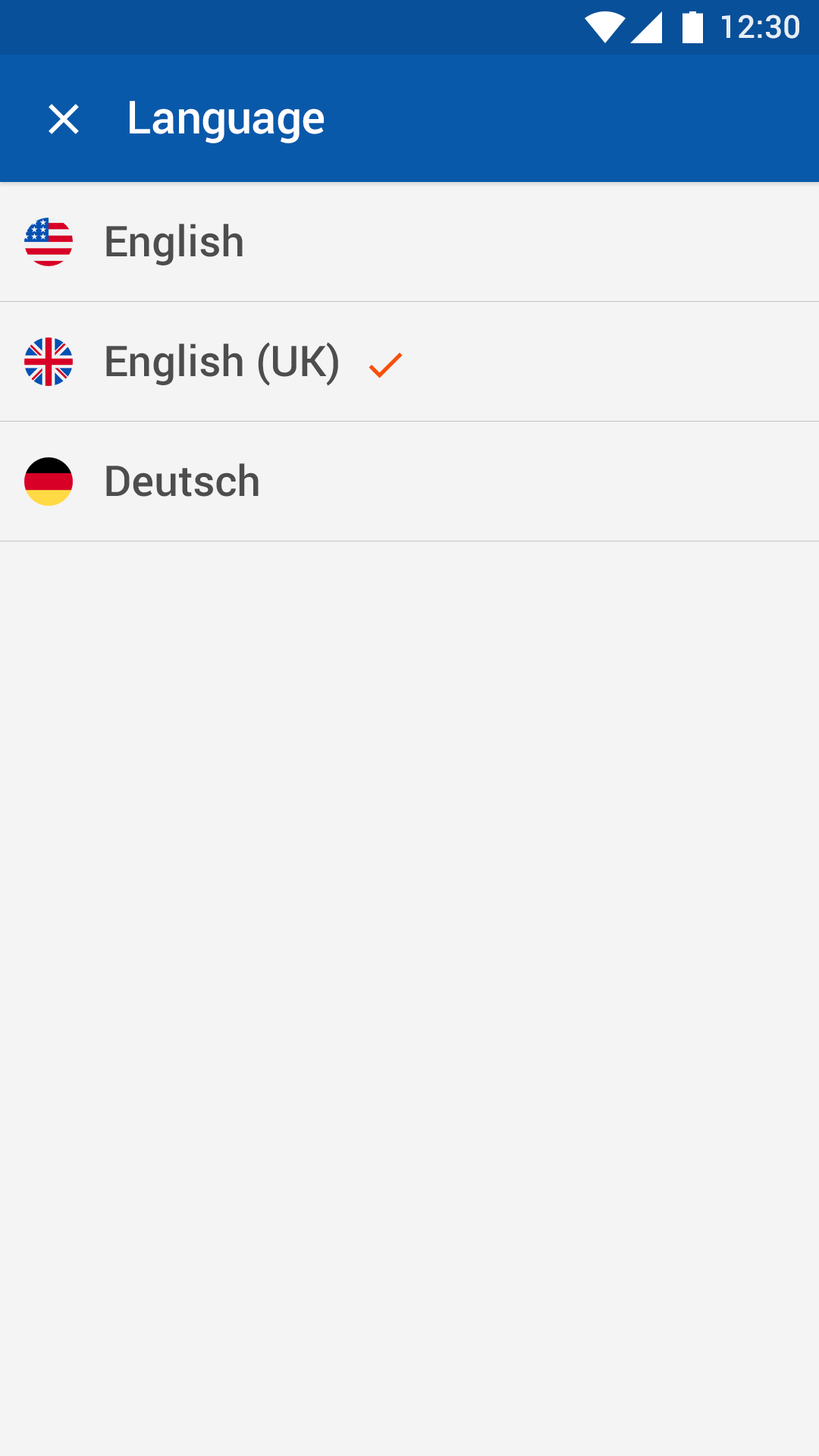
<style>
.page{position:relative;width:819px;height:1456px;background:#f4f4f4}
.page>*{position:absolute;margin:0}
.t1{font:31.8px "Roboto-Medium";color:#e7eef5}
.t2{font:45.5px "Roboto-Medium";color:#ffffff}
.t3{font:42.5px/119.8px "Roboto-Medium";color:#4d4d4d}
</style>
<div class="page">
<p class="t1" style="left:722px;top:14px;width:77px;height:25px">12:30</p>
<p class="t2" style="left:130px;top:101px;width:194px;height:42px">Language</p>
<p class="t3" style="left:106px;top:224px;width:232px;height:273px">English<br>English (UK)<br>Deutsch</p>
</div>
